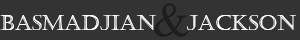
<style>
.page{position:relative;width:300px;height:40px;background:#333333}
.page>*{position:absolute;margin:0}
.t1{font:21.2px "Castellar";color:#ffffff}
</style>
<div class="page">
<p class="t1" style="left:0px;top:15px;width:297px;height:15px">Basmadjian    Jackson</p>
</div>
